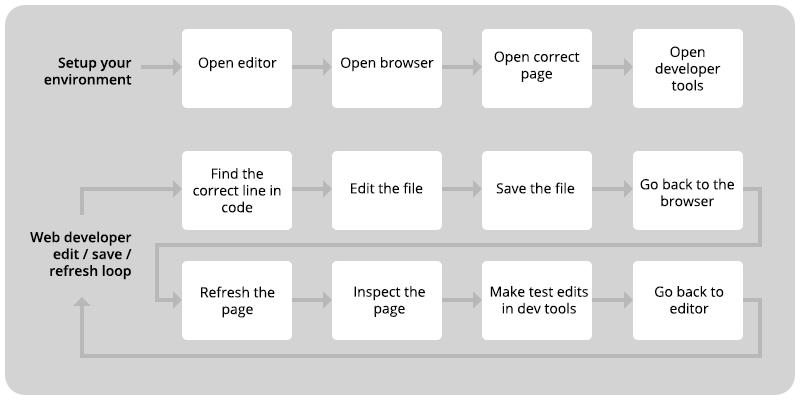
<style>
.page{position:relative;width:800px;height:400px;background:#d3d3d3}
.page>*{position:absolute;margin:0}
.t1{font:14px "OpenSans-Regular";color:#000000}
.t2{font:14px "OpenSans-SemiBold";color:#000000}
</style>
<div class="page">
<p class="t1" style="left:494px;top:51px;width:86px;height:31px;text-align:center">Open correct page</p>
<p class="t1" style="left:655px;top:46px;width:66px;height:45px;text-align:center">Open developer tools</p>
<p class="t2" style="left:44px;top:57px;width:88px;height:28px;text-align:right">Setup your environment</p>
<p class="t1" style="left:198px;top:57px;width:79px;height:15px">Open editor</p>
<p class="t1" style="left:341px;top:57px;width:93px;height:15px">Open browser</p>
<p class="t1" style="left:193px;top:168px;width:88px;height:45px;text-align:center">Find the correct line in code</p>
<p class="t1" style="left:351px;top:182px;width:72px;height:12px">Edit the file</p>
<p class="t1" style="left:496px;top:182px;width:79px;height:12px">Save the file</p>
<p class="t1" style="left:640px;top:178px;width:94px;height:29px;text-align:center">Go back to the browser</p>
<p class="t2" style="left:30px;top:231px;width:102px;height:49px;text-align:right">Web developer <br>edit / save / refresh loop</p>
<p class="t1" style="left:201px;top:286px;width:74px;height:32px;text-align:center">Refresh the page</p>
<p class="t1" style="left:354px;top:286px;width:71px;height:31px;text-align:center">Inspect the page</p>
<p class="t1" style="left:490px;top:286px;width:98px;height:28px;text-align:center">Make test edits in dev tools</p>
<p class="t1" style="left:655px;top:286px;width:69px;height:28px;text-align:center">Go back to editor</p>
</div>
